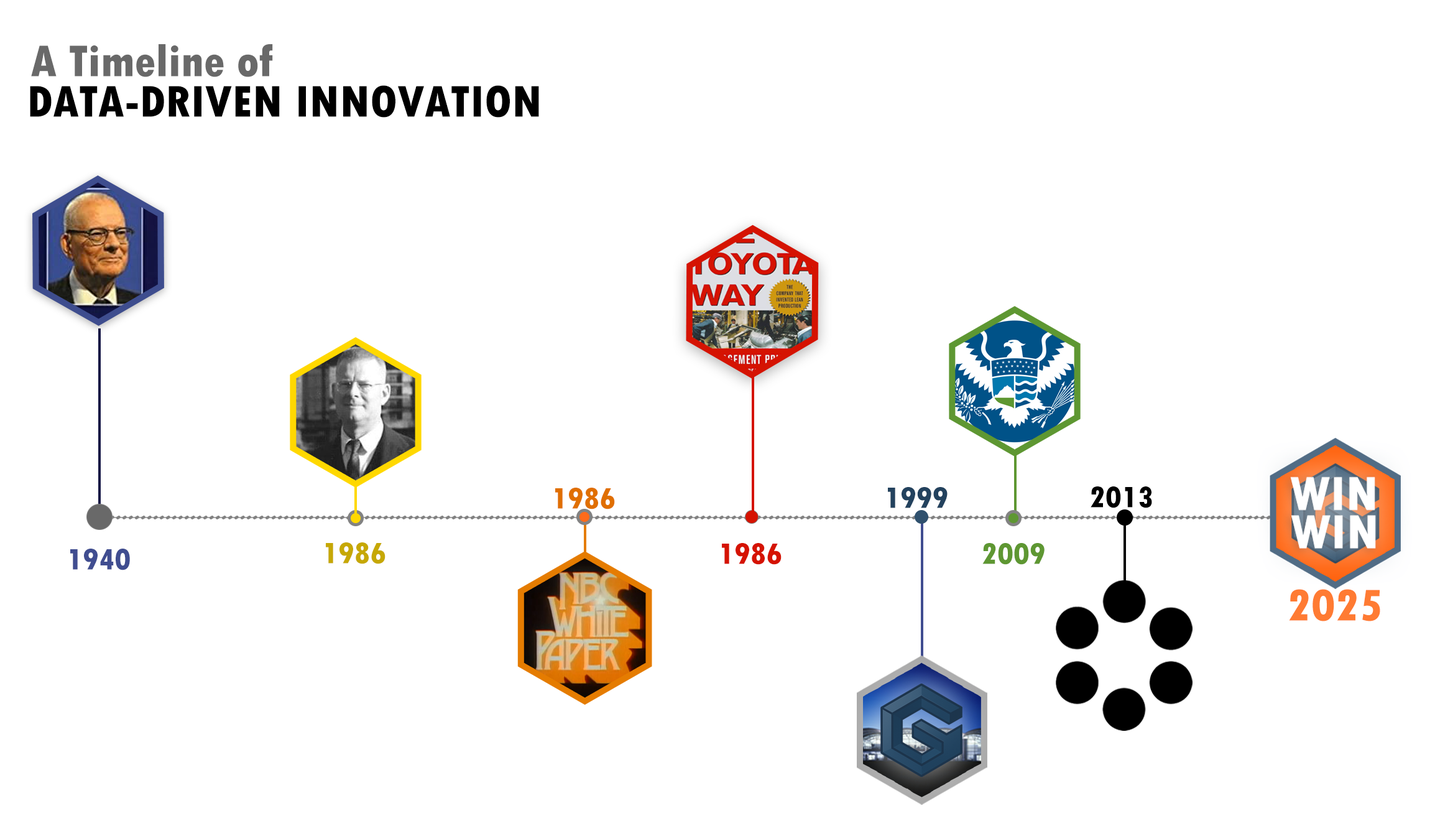
<style>
.page{position:relative;width:1435px;height:831px;background:#ffffff}
.page>*{position:absolute;margin:0}
.t1{font:46.6px "TwCenMT-CondensedExtraBold";color:#696969;scale:1.05 1}
.t2{font:46.6px "TwCenMT-CondensedExtraBold";color:#000000;scale:1.05 1}
.t3{font:31.1px "TwCenMT-CondensedExtraBold";color:#e06f00;scale:1.05 1}
.t4{font:31.1px "TwCenMT-CondensedExtraBold";color:#23425e;scale:1.05 1}
.t5{font:31.1px "TwCenMT-CondensedExtraBold";color:#000000;scale:1.05 1}
.t6{font:31.1px "TwCenMT-CondensedExtraBold";color:#c6a804;scale:1.05 1}
.t7{font:31.1px "TwCenMT-CondensedExtraBold";color:#d51302;scale:1.05 1}
.t8{font:31.1px "TwCenMT-CondensedExtraBold";color:#5e9732;scale:1.05 1}
.t9{font:31.1px "TwCenMT-CondensedExtraBold";color:#404d90;scale:1.05 1}
.t10{font:46.6px "TwCenMT-CondensedExtraBold";color:#ff7b33;scale:1.05 1}
</style>
<div class="page">
<p class="t1" style="left:31px;top:44px;width:242px;height:33px">A Timeline of</p>
<p class="t2" style="left:30px;top:85px;width:509px;height:33px">DATA-DRIVEN INNOVATION</p>
<p class="t3" style="left:555px;top:488px;width:60px;height:21px">1986</p>
<p class="t4" style="left:888px;top:487px;width:60px;height:21px">1999</p>
<p class="t5" style="left:1091px;top:486px;width:61px;height:22px">2013</p>
<p class="t6" style="left:326px;top:542px;width:60px;height:22px">1986</p>
<p class="t7" style="left:722px;top:543px;width:60px;height:22px">1986</p>
<p class="t8" style="left:983px;top:543px;width:62px;height:22px">2009</p>
<p class="t9" style="left:70px;top:548px;width:60px;height:22px">1940</p>
<p class="t10" style="left:1289px;top:589px;width:92px;height:32px">2025</p>
</div>
